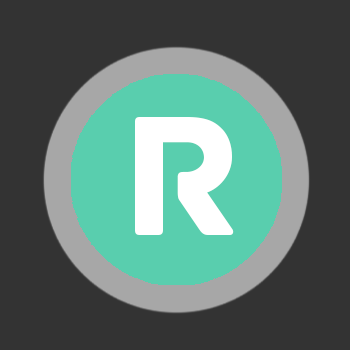
<style>
.page{position:relative;width:350px;height:350px;background:#333333}
.page>*{position:absolute;margin:0}
.t1{font:180px "Archive";color:#ffffff}
</style>
<div class="page">
<p class="t1" style="left:135px;top:117px;width:99px;height:118px">R</p>
</div>
